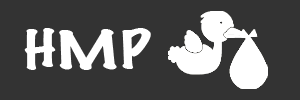
<style>
.page{position:relative;width:300px;height:100px;background:#333333}
.page>*{position:absolute;margin:0}
.t1{font:48px "MarkerFelt-Thin";color:#ffffff;scale:1.38 1}
</style>
<div class="page">
<p class="t1" style="left:24px;top:28px;width:127px;height:42px">HMP</p>
</div>
